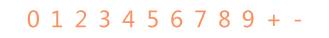
<style>
.page{position:relative;width:329px;height:38px;background:#ffffff}
.page>*{position:absolute;margin:0}
.t1{font:22px "MicrosoftYaHei";letter-spacing:0.5em;color:#fa9364}
</style>
<div class="page">
<p class="t1" style="left:27px;top:10px;width:274px;height:18px">0123456789+-</p>
</div>
